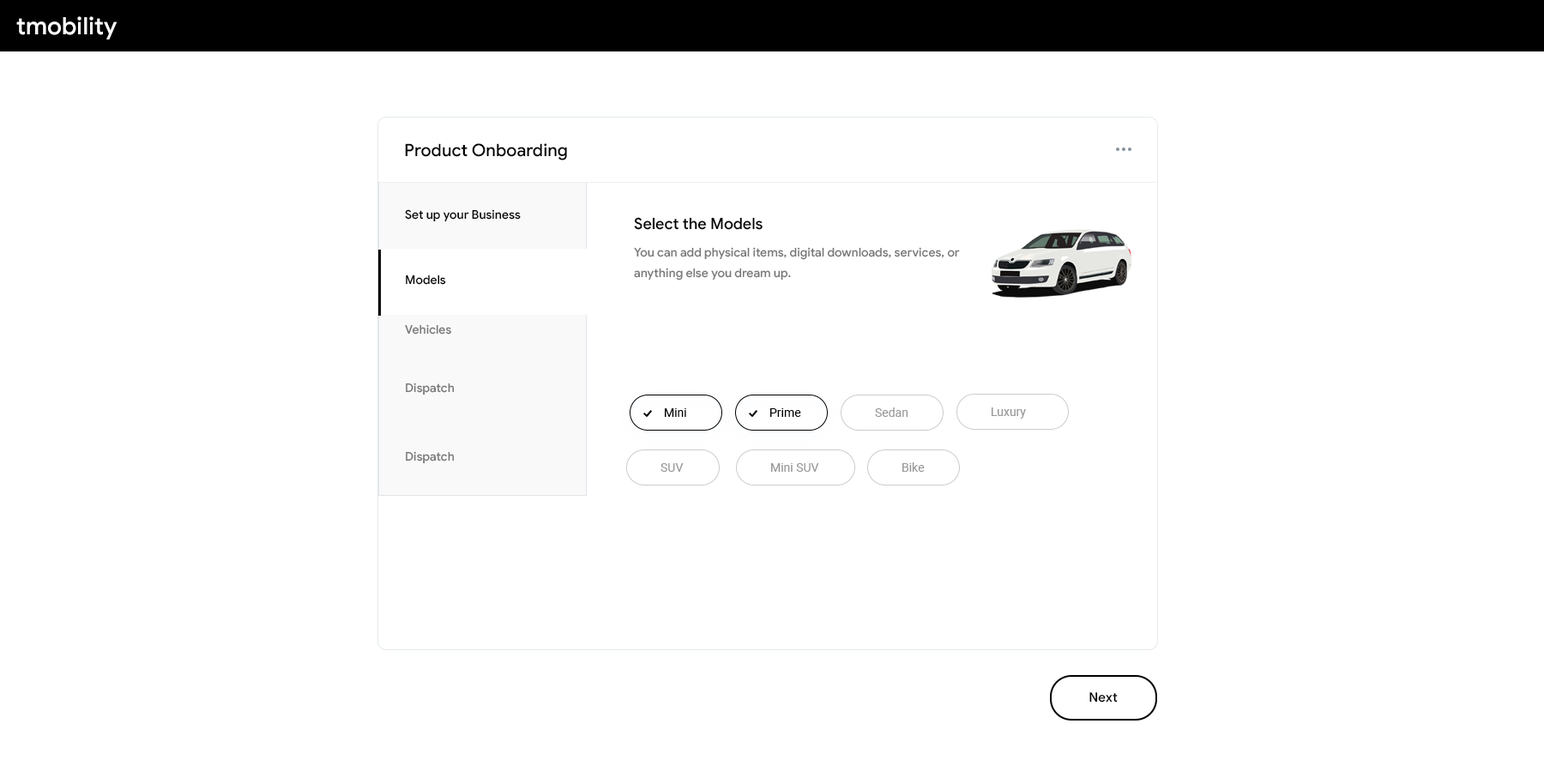
<style>
.page{position:relative;width:1544px;height:772px;background:#ffffff}
.page>*{position:absolute;margin:0}
.t1{font:24px "GoogleSans-Medium";color:#ffffff}
.t2{font:17.2px "GoogleSans-Medium";color:#000000}
.t3{font:12px "GoogleSans-Medium";color:#000000}
.t4{font:15.4px "GoogleSans-Medium";color:#000000}
.t5{font:12px/20.6px "GoogleSans-Medium";color:#777777}
.t6{font:12px "GoogleSans-Medium";color:#777777}
.t7{font:12px "Roboto-Regular";color:#000000}
.t8{font:12px "Roboto-Regular";color:#999999}
.t9{font:12.9px "GoogleSans-Medium";letter-spacing:0.01em;color:#000000}
</style>
<div class="page">
<p class="t1" style="left:16px;top:16px;width:101px;height:23px">tmobility</p>
<p class="t2" style="left:405px;top:143px;width:162px;height:17px">Product Onboarding</p>
<p class="t3" style="left:405px;top:209px;width:116px;height:13px">Set up your Business</p>
<p class="t4" style="left:634px;top:217px;width:129px;height:13px">Select the Models</p>
<p class="t5" style="left:634px;top:247px;width:326px;height:34px">You can add physical items, digital downloads, services, or anything else you dream up.</p>
<p class="t3" style="left:406px;top:275px;width:40px;height:10px">Models</p>
<p class="t6" style="left:405px;top:324px;width:46px;height:11px">Vehicles</p>
<p class="t6" style="left:406px;top:383px;width:49px;height:13px">Dispatch</p>
<p class="t7" style="left:665px;top:408px;width:21px;height:9px">Mini</p>
<p class="t7" style="left:770px;top:408px;width:31px;height:9px">Prime</p>
<p class="t8" style="left:875px;top:408px;width:34px;height:9px">Sedan</p>
<p class="t8" style="left:992px;top:408px;width:34px;height:11px">Luxury</p>
<p class="t6" style="left:406px;top:451px;width:49px;height:13px">Dispatch</p>
<p class="t8" style="left:661px;top:463px;width:23px;height:9px">SUV</p>
<p class="t8" style="left:771px;top:463px;width:48px;height:9px">Mini SUV</p>
<p class="t8" style="left:903px;top:462px;width:22px;height:10px">Bike</p>
<p class="t9" style="left:1090px;top:692px;width:28px;height:11px">Next</p>
</div>
